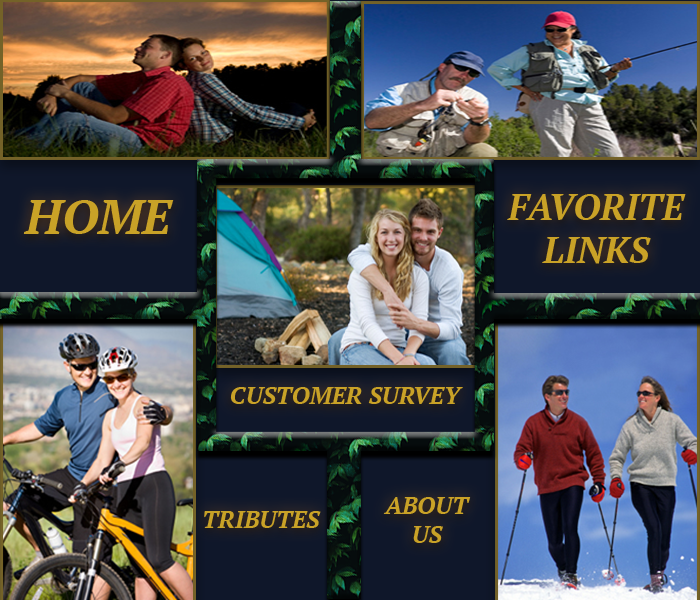
<style>
.page{position:relative;width:700px;height:600px}
.page>*{position:absolute;margin:0}
.t1{font:36px "PTSerif-BoldItalic";color:#c9a227}
.t2{font:48px "PTSerif-BoldItalic";color:#c9a227}
.t3{font:24px "PTSerif-BoldItalic";color:#c9a227}
</style>
<div class="page">
<p class="t1" style="left:507px;top:194px;width:179px;height:70px;text-align:center">FAVORITE LINKS</p>
<p class="t2" style="left:23px;top:200px;width:151px;height:34px">HOME</p>
<p class="t3" style="left:230px;top:387px;width:233px;height:17px">CUSTOMER SURVEY</p>
<p class="t3" style="left:383px;top:497px;width:88px;height:46px;text-align:center">ABOUT US</p>
<p class="t3" style="left:204px;top:511px;width:117px;height:17px">TRIBUTES</p>
</div>
